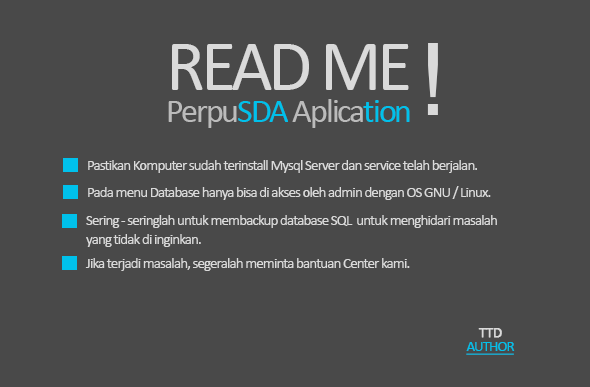
<style>
.page{position:relative;width:590px;height:387px;background:#494949}
.page>*{position:absolute;margin:0}
.t1{font:72px/32px "Calibri";letter-spacing:-0.06em;color:#dadada}
.t2{font:34px/32px "Calibri";letter-spacing:-0.06em;color:#bbbbbb}
.t3{font:34px/32px "Calibri";letter-spacing:-0.06em;color:#00c1eb}
.t4{font:100px "Helvetica";letter-spacing:-0.06em;color:#dadada}
.t5{font:15px "Calibri";letter-spacing:-0.06em;color:#dadada}
.t6{font:15px/19px "Calibri";letter-spacing:-0.06em;color:#dadada}
.t7{font:15px/14px "Calibri";letter-spacing:-0.06em;color:#00c1eb;text-decoration:underline}
.t8{font:15px/14px "Calibri";letter-spacing:-0.06em;color:#dadada;font-weight:bold}
</style>
<div class="page">
<p class="t1" style="left:168px;top:44px;width:242px;height:84px">READ ME<br><span class="t2">Perpu</span><span class="t3">SDA </span><span class="t2">Aplica</span><span class="t3">tion</span></p>
<p class="t4" style="left:427px;top:43px;width:11px;height:72px">!</p>
<p class="t5" style="left:88px;top:160px;width:389px;height:13px">Pastikan Komputer sudah terinstall Mysql Server dan service telah berjalan.</p>
<p class="t5" style="left:88px;top:186px;width:403px;height:14px">Pada menu Database hanya bisa di akses oleh admin dengan OS GNU / Linux.</p>
<p class="t6" style="left:86px;top:215px;width:411px;height:32px">Sering - seringlah untuk membackup database SQL  untuk menghidari masalah<br>yang tidak di inginkan.</p>
<p class="t5" style="left:85px;top:258px;width:325px;height:13px">Jika terjadi masalah, segeralah meminta bantuan Center kami.</p>
<p class="t7" style="left:466px;top:328px;width:49px;height:27px;text-align:center"><span class="t8">TTD<br></span>AUTHOR</p>
</div>
